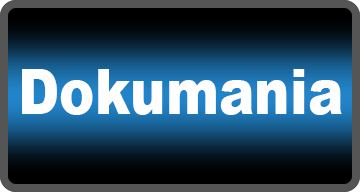
<style>
.page{position:relative;width:360px;height:192px}
.page>*{position:absolute;margin:0}
.t1{font:62.7px "Arial-Black";color:#fefeff;scale:0.85 1}
</style>
<div class="page">
<p class="t1" style="left:22px;top:69px;width:320px;height:46px">Dokumania</p>
</div>
